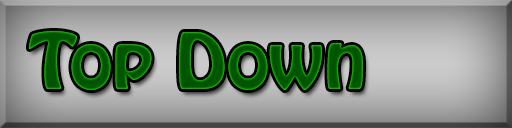
<style>
.page{position:relative;width:512px;height:128px}
.page>*{position:absolute;margin:0}
.t1{font:68.5px "HoboStd";color:#025500;scale:1.12 1}
</style>
<div class="page">
<p class="t1" style="left:29px;top:31px;width:334px;height:59px">Top Down</p>
</div>
